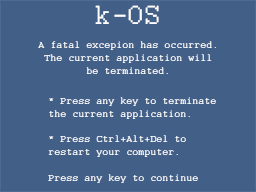
<style>
.page{position:relative;width:256px;height:192px;background:#425f88}
.page>*{position:absolute;margin:0}
.t1{font:29.3px "Courier";color:#ffffff}
.t2{font:10.7px "Courier";color:#ffffff}
</style>
<div class="page">
<p class="t1" style="left:95px;top:5px;width:64px;height:19px">k-OS</p>
<p class="t2" style="left:38px;top:41px;width:178px;height:33px;text-align:center">A fatal excepion has occurred.<br>The current application will<br>be terminated.</p>
<p class="t2" style="left:48px;top:97px;width:168px;height:86px">* Press any key to terminate<br>the current application.<br><br>* Press Ctrl+Alt+Del to<br>restart your computer.<br><br>Press any key to continue</p>
</div>
